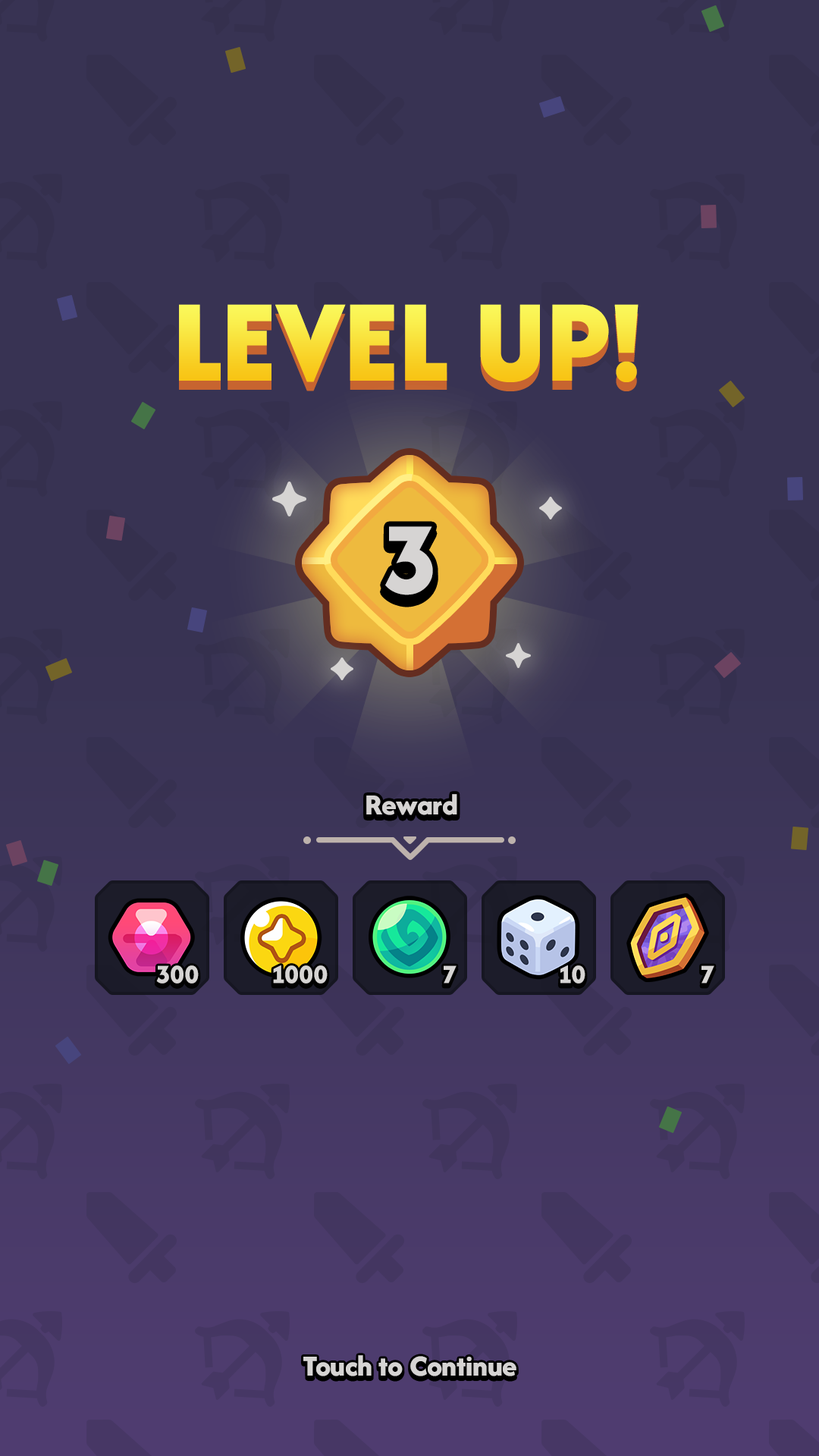
<style>
.page{position:relative;width:819px;height:1456px;background:#383353}
.page>*{position:absolute;margin:0}
.t1{font:121.3px "AfacadFlux-ExtraBold";text-transform:uppercase}
.t2{font:106.2px "AfacadFlux-ExtraBold";color:#d6d4d3;text-transform:uppercase}
.t3{font:30.3px "AfacadFlux-ExtraBold";color:#d6d4d3}
.t4{font:27.3px "AfacadFlux-ExtraBold";color:#d6d4d3}
</style>
<div class="page">
<p class="t1" style="left:179px;top:304px;width:460px;height:78px">Level Up!</p>
<p class="t2" style="left:385px;top:526px;width:48px;height:69px">3</p>
<p class="t3" style="left:366px;top:794px;width:91px;height:21px">Reward</p>
<p class="t4" style="left:156px;top:965px;width:43px;height:19px">300</p>
<p class="t4" style="left:273px;top:965px;width:55px;height:19px">1000</p>
<p class="t4" style="left:444px;top:965px;width:13px;height:19px">7</p>
<p class="t4" style="left:560px;top:965px;width:25px;height:19px">10</p>
<p class="t4" style="left:701px;top:965px;width:13px;height:19px">7</p>
<p class="t3" style="left:303px;top:1355px;width:213px;height:21px">Touch to Continue</p>
</div>
